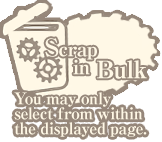
<style>
.page{position:relative;width:162px;height:142px;background:#ffffff}
.page>*{position:absolute;margin:0}
.t1{font:16px/15px "RyuminPro-ExBold";letter-spacing:-0.04em;color:#fff8e6}
</style>
<div class="page">
<p class="t1" style="left:14px;top:92px;width:133px;height:45px">You may only<br>select from within<br>the displayed page.</p>
</div>
